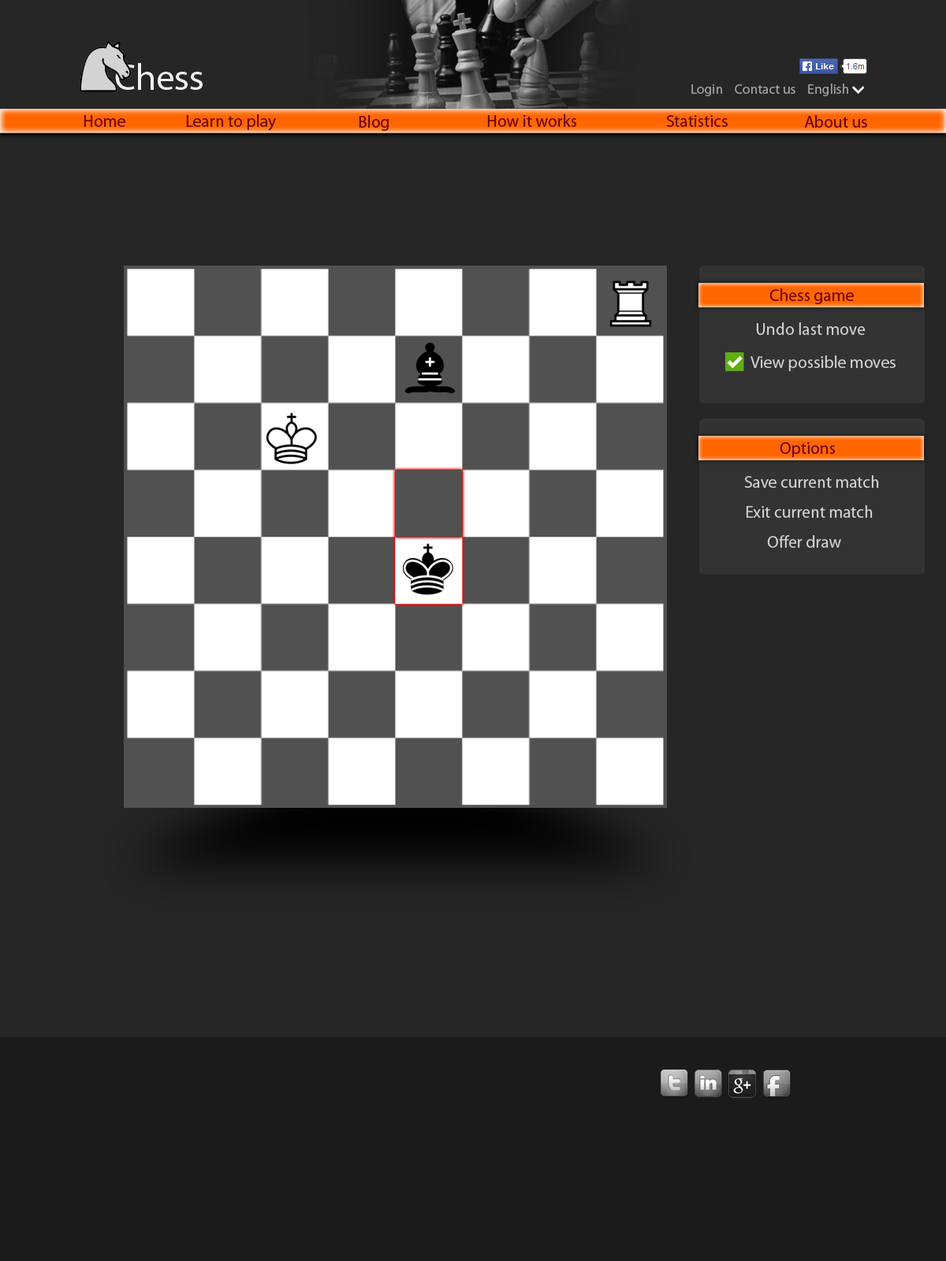
<style>
.page{position:relative;width:946px;height:1261px;background:#262626}
.page>*{position:absolute;margin:0}
.t1{font:36.8px "MyriadPro-Regular";color:#efefef}
.t2{font:13.8px "MyriadPro-Regular";color:#a2a2a2}
.t3{font:16.9px "MyriadPro-Regular";color:#69000a}
.t4{font:16.9px "MyriadPro-Regular";color:#d3d3d3}
</style>
<div class="page">
<p class="t1" style="left:115px;top:63px;width:88px;height:27px">Chess</p>
<p class="t2" style="left:691px;top:84px;width:157px;height:12px">Login    Contact us    English</p>
<p class="t3" style="left:84px;top:115px;width:41px;height:12px">Home</p>
<p class="t3" style="left:186px;top:114px;width:90px;height:17px">Learn to play</p>
<p class="t3" style="left:359px;top:115px;width:30px;height:16px">Blog</p>
<p class="t3" style="left:487px;top:114px;width:90px;height:13px">How it works</p>
<p class="t3" style="left:666px;top:115px;width:61px;height:12px">Statistics</p>
<p class="t3" style="left:804px;top:115px;width:63px;height:13px">About us</p>
<p class="t3" style="left:769px;top:288px;width:84px;height:16px">Chess game</p>
<p class="t4" style="left:756px;top:322px;width:109px;height:13px">Undo last move</p>
<p class="t4" style="left:750px;top:355px;width:145px;height:16px">View possible moves</p>
<p class="t3" style="left:779px;top:442px;width:56px;height:15px">Options</p>
<p class="t4" style="left:744px;top:475px;width:135px;height:13px">Save current match</p>
<p class="t4" style="left:746px;top:505px;width:126px;height:13px">Exit current match</p>
<p class="t4" style="left:767px;top:535px;width:74px;height:13px">Offer draw</p>
</div>
